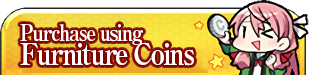
<style>
.page{position:relative;width:309px;height:75px}
.page>*{position:absolute;margin:0}
.t1{font:30px/17px "RyuminPro-ExBold";letter-spacing:-0.08em;color:#fffefd;scale:0.9 1}
.t2{font:22px/17px "RyuminPro-ExBold";letter-spacing:-0.08em;color:#fffefd;scale:0.9 1}
</style>
<div class="page">
<p class="t1" style="left:20px;top:24px;width:174px;height:42px"><span class="t2">Purchase using <br></span>Furniture Coins</p>
</div>
